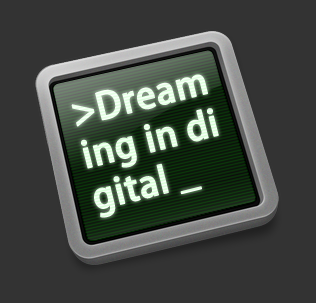
<style>
.page{position:relative;width:316px;height:303px;background:#333333}
.page>*{position:absolute;margin:0}
.t1{font:36px "AdobeHeitiStd-Regular";color:#eaffea;font-weight:bold}
</style>
<div class="page">
<p class="t1" style="left:71px;top:74px;width:148px;height:144px;rotate:-14deg">&gt;Dream<br>ing in di<br>gital _</p>
</div>
